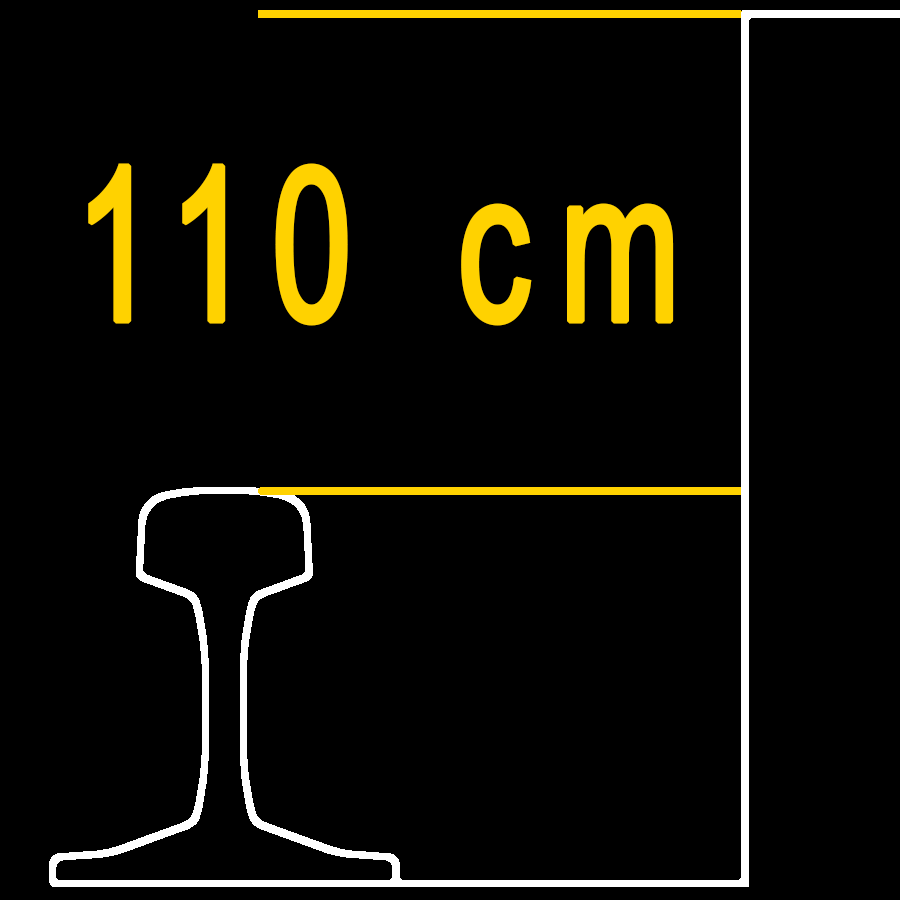
<style>
.page{position:relative;width:900px;height:900px;background:#000000}
.page>*{position:absolute;margin:0}
.t1{font:215.9px "ArialMT";letter-spacing:0.2em;color:#ffd200;font-weight:bold;scale:0.67 1}
</style>
<div class="page">
<p class="t1" style="left:88px;top:163px;width:586px;height:163px">110 cm</p>
</div>
